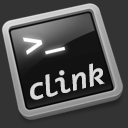
<style>
.page{position:relative;width:128px;height:128px;background:#333333}
.page>*{position:absolute;margin:0}
.t1{font:32px "Consolas-BoldItalic";color:#d8d8d8}
.t2{font:32px "Consolas-BoldItalic";letter-spacing:-0.04em;color:#d8d8d8}
.t3{font:32px "Consolas-BoldItalic";letter-spacing:-0.05em;color:#d8d8d8}
</style>
<div class="page">
<p class="t1" style="left:30px;top:63px;width:75px;height:37px;rotate:-14deg"><span class="t2">c</span><span class="t3">l</span>ink</p>
</div>
